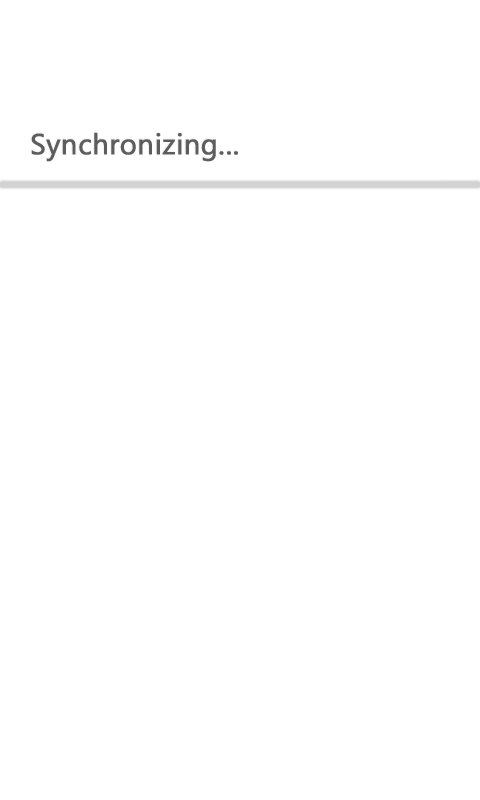
<style>
.page{position:relative;width:480px;height:800px;background:#ffffff}
.page>*{position:absolute;margin:0}
.t1{font:28.7px "SegoeWP";color:#5e5e5e;font-weight:bold}
</style>
<div class="page">
<p class="t1" style="left:31px;top:132px;width:207px;height:30px">Synchronizing...</p>
</div>
